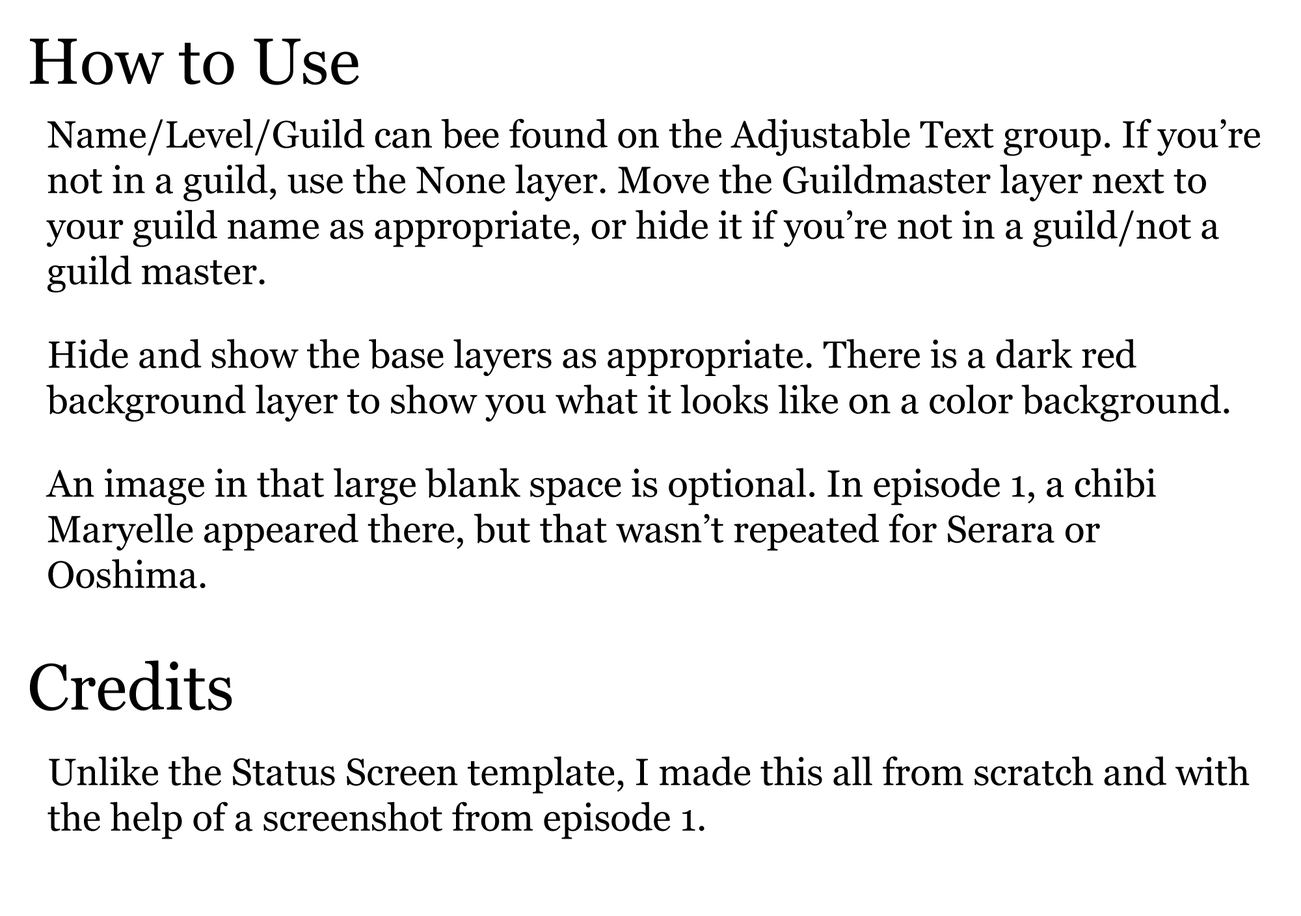
<style>
.page{position:relative;width:1301px;height:916px;background:#ffffff}
.page>*{position:absolute;margin:0}
.t1{font:65.1px "Georgia";color:#000000}
.t2{font:38px "Georgia";color:#000000}
</style>
<div class="page">
<p class="t1" style="left:30px;top:38px;width:329px;height:47px">How to Use</p>
<p class="t2" style="left:46px;top:118px;width:1215px;height:471px">Name/Level/Guild can bee found on the Adjustable Text group. If you’re not in a guild, use the None layer. Move the Guildmaster layer next to your guild name as appropriate, or hide it if you’re not in a guild/not a guild master.<br><br>Hide and show the base layers as appropriate. There is a dark red background layer to show you what it looks like on a color background.<br><br>An image in that large blank space is optional. In episode 1, a chibi Maryelle appeared there, but that wasn’t repeated for Serara or Ooshima.</p>
<p class="t1" style="left:30px;top:660px;width:202px;height:51px">Credits</p>
<p class="t2" style="left:48px;top:756px;width:1202px;height:83px">Unlike the Status Screen template, I made this all from scratch and with the help of a screenshot from episode 1.</p>
</div>
